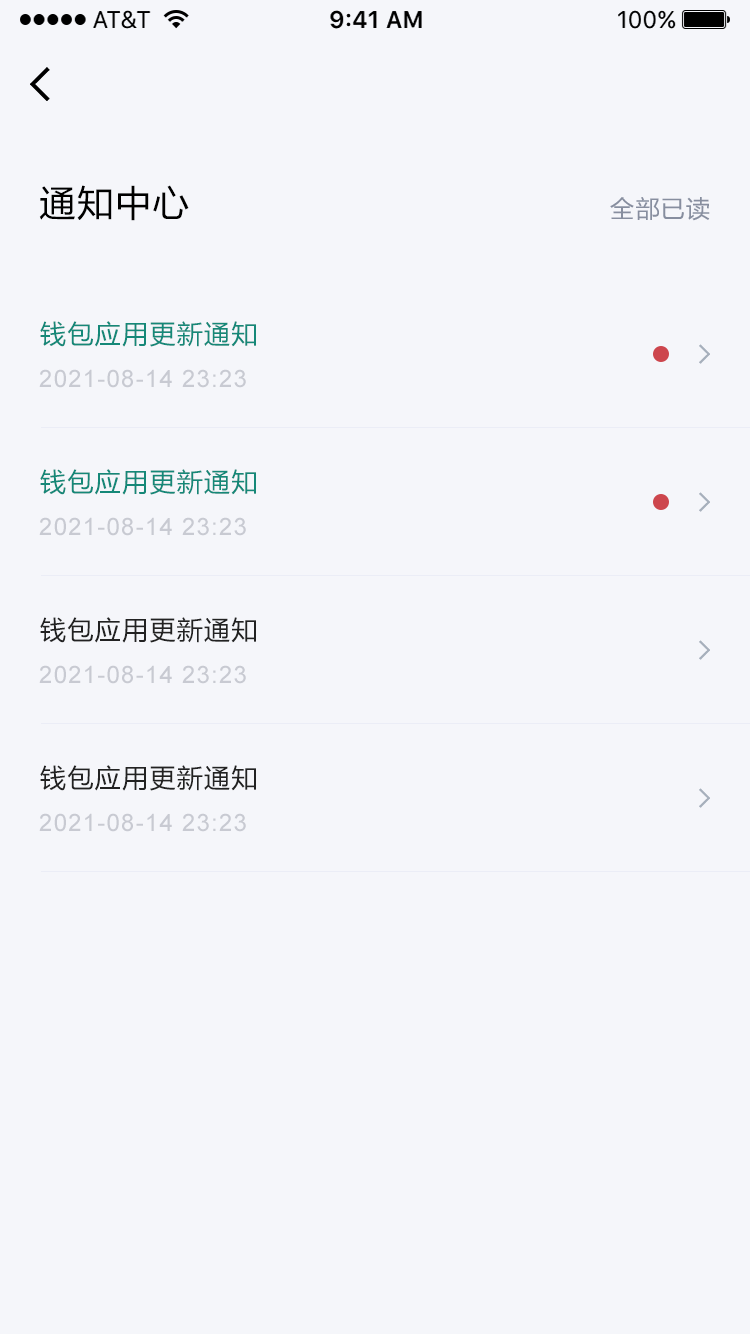
<style>
.page{position:relative;width:750px;height:1334px;background:#f5f6fa}
.page>*{position:absolute;margin:0}
.t1{font:36px "MicrosoftYaHei";letter-spacing:0.05em;color:#000000}
.t2{font:24px "MicrosoftYaHei";letter-spacing:0.05em;color:#878e9f}
.t3{font:26px "MicrosoftYaHei";letter-spacing:0.05em;color:#158878}
.t4{font:24px "ArialMT";letter-spacing:0.05em;color:#c8cad2}
.t5{font:26px "MicrosoftYaHei";letter-spacing:0.05em;color:#222222}
</style>
<div class="page">
<p class="t1" style="left:39px;top:185px;width:150px;height:36px">通知中心</p>
<p class="t2" style="left:610px;top:197px;width:100px;height:24px">全部已读</p>
<p class="t3" style="left:40px;top:321px;width:216px;height:26px">钱包应用更新通知</p>
<p class="t4" style="left:39px;top:369px;width:207px;height:19px">2021-08-14 23:23</p>
<p class="t3" style="left:40px;top:469px;width:216px;height:26px">钱包应用更新通知</p>
<p class="t4" style="left:39px;top:517px;width:207px;height:19px">2021-08-14 23:23</p>
<p class="t5" style="left:40px;top:617px;width:216px;height:26px">钱包应用更新通知</p>
<p class="t4" style="left:39px;top:665px;width:207px;height:19px">2021-08-14 23:23</p>
<p class="t5" style="left:40px;top:765px;width:216px;height:26px">钱包应用更新通知</p>
<p class="t4" style="left:39px;top:813px;width:207px;height:19px">2021-08-14 23:23</p>
</div>
